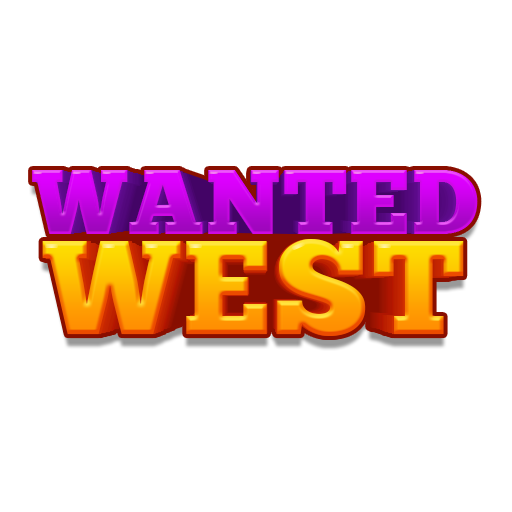
<style>
.page{position:relative;width:512px;height:512px;background:#ffffff}
.page>*{position:absolute;margin:0}
.t1{font:91.7px "ChunkFiveEx";letter-spacing:0.025em}
.t2{font:90.7px "ChunkFiveEx";letter-spacing:0.025em}
.t3{font:89.8px "ChunkFiveEx";letter-spacing:0.025em}
.t4{font:88.9px "ChunkFiveEx";letter-spacing:0.025em}
.t5{font:88.1px "ChunkFiveEx";letter-spacing:0.025em}
.t6{font:87.2px "ChunkFiveEx";letter-spacing:0.025em}
.t7{font:86.3px "ChunkFiveEx";letter-spacing:0.025em}
.t8{font:85.4px "ChunkFiveEx";letter-spacing:0.025em}
.t9{font:84.6px "ChunkFiveEx";letter-spacing:0.025em}
.t10{font:133.3px "ChunkFiveEx";letter-spacing:0.025em}
.t11{font:132px "ChunkFiveEx";letter-spacing:0.025em}
.t12{font:130.7px "ChunkFiveEx";letter-spacing:0.025em}
.t13{font:129.4px "ChunkFiveEx";letter-spacing:0.025em}
.t14{font:128.1px "ChunkFiveEx";letter-spacing:0.025em}
.t15{font:126.8px "ChunkFiveEx";letter-spacing:0.025em}
.t16{font:125.5px "ChunkFiveEx";letter-spacing:0.025em}
.t17{font:124.3px "ChunkFiveEx";letter-spacing:0.025em}
.t18{font:123px "ChunkFiveEx";letter-spacing:0.025em}
.t19{font:121.8px "ChunkFiveEx";letter-spacing:0.025em}
.t20{font:120.1px "ChunkFiveEx";letter-spacing:0.025em}
.t21{font:118.9px "ChunkFiveEx";letter-spacing:0.025em}
.t22{font:117.7px "ChunkFiveEx";letter-spacing:0.025em}
.t23{font:116.6px "ChunkFiveEx";letter-spacing:0.025em}
</style>
<div class="page">
<p class="t1" style="left:32px;top:170px;width:446px;height:64px">WANTED</p>
<p class="t2" style="left:34px;top:170px;width:441px;height:64px">WANTED</p>
<p class="t3" style="left:36px;top:171px;width:437px;height:63px">WANTED</p>
<p class="t4" style="left:38px;top:171px;width:433px;height:62px">WANTED</p>
<p class="t5" style="left:41px;top:171px;width:428px;height:62px">WANTED</p>
<p class="t6" style="left:43px;top:172px;width:423px;height:61px">WANTED</p>
<p class="t7" style="left:45px;top:173px;width:420px;height:60px">WANTED</p>
<p class="t8" style="left:47px;top:173px;width:415px;height:59px">WANTED</p>
<p class="t8" style="left:47px;top:173px;width:415px;height:59px">WANTED</p>
<p class="t9" style="left:49px;top:173px;width:412px;height:59px">WANTED</p>
<p class="t10" style="left:42px;top:239px;width:422px;height:97px">WEST</p>
<p class="t11" style="left:45px;top:239px;width:416px;height:97px">WEST</p>
<p class="t12" style="left:47px;top:239px;width:412px;height:96px">WEST</p>
<p class="t13" style="left:49px;top:240px;width:408px;height:95px">WEST</p>
<p class="t14" style="left:51px;top:241px;width:404px;height:94px">WEST</p>
<p class="t15" style="left:53px;top:241px;width:401px;height:93px">WEST</p>
<p class="t16" style="left:55px;top:242px;width:397px;height:92px">WEST</p>
<p class="t17" style="left:57px;top:243px;width:393px;height:91px">WEST</p>
<p class="t18" style="left:59px;top:243px;width:389px;height:90px">WEST</p>
<p class="t19" style="left:61px;top:243px;width:385px;height:90px">WEST</p>
<p class="t20" style="left:63px;top:244px;width:380px;height:88px">WEST</p>
<p class="t21" style="left:65px;top:244px;width:376px;height:87px">WEST</p>
<p class="t22" style="left:67px;top:244px;width:372px;height:87px">WEST</p>
<p class="t23" style="left:69px;top:245px;width:369px;height:86px">WEST</p>
</div>
